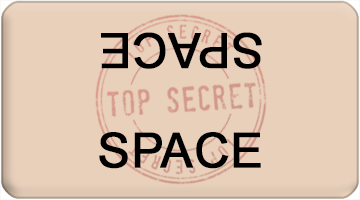
<style>
.page{position:relative;width:360px;height:200px;background:#e8d0bb}
.page>*{position:absolute;margin:0}
.t1{font:48px "ArialMT";color:#000000;font-weight:bold}
</style>
<div class="page">
<p class="t1" style="left:101px;top:32px;width:161px;height:37px;rotate:180deg">SPACE</p>
<p class="t1" style="left:99px;top:132px;width:162px;height:37px">SPACE</p>
</div>
